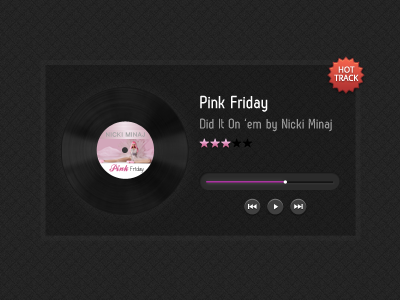
<style>
.page{position:relative;width:400px;height:300px}
.page>*{position:absolute;margin:0}
.t1{font:8.2px/8.2px "DroidSans";letter-spacing:-0.025em;color:#ffffff;text-transform:uppercase;font-weight:bold}
.t2{font:18px "ZagBold";color:#ffffff}
.t3{font:14px "ZagBold";color:#999898}
.t4{font:7px "Vrinda-Bold";color:#a0a0a0;text-transform:uppercase}
.t5{font:9px "BallparkWeiner";color:#d46093}
.t6{font:6px "Birdcherry-Regular"}
</style>
<div class="page">
<p class="t1" style="left:334px;top:66px;width:25px;height:15px;text-align:center">HOT<br>Track</p>
<p class="t2" style="left:200px;top:95px;width:68px;height:17px">Pink Friday</p>
<p class="t3" style="left:200px;top:118px;width:132px;height:14px">Did It On ‘em by Nicki Minaj</p>
<p class="t4" style="left:106px;top:132px;width:39px;height:5px">Nicki Minaj</p>
<p class="t5" style="left:109px;top:164px;width:20px;height:8px">Pink</p>
<p class="t6" style="left:130px;top:166px;width:14px;height:7px">Friday</p>
</div>
